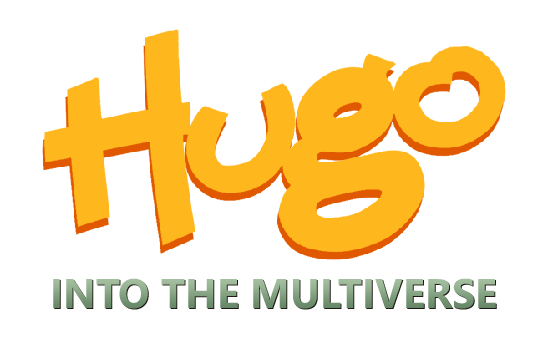
<style>
.page{position:relative;width:536px;height:350px;background:#ffffff}
.page>*{position:absolute;margin:0}
.t1{font:41.3px "SegoeUI-Bold"}
</style>
<div class="page">
<p class="t1" style="left:53px;top:278px;width:443px;height:31px">INTO THE MULTIVERSE</p>
</div>
